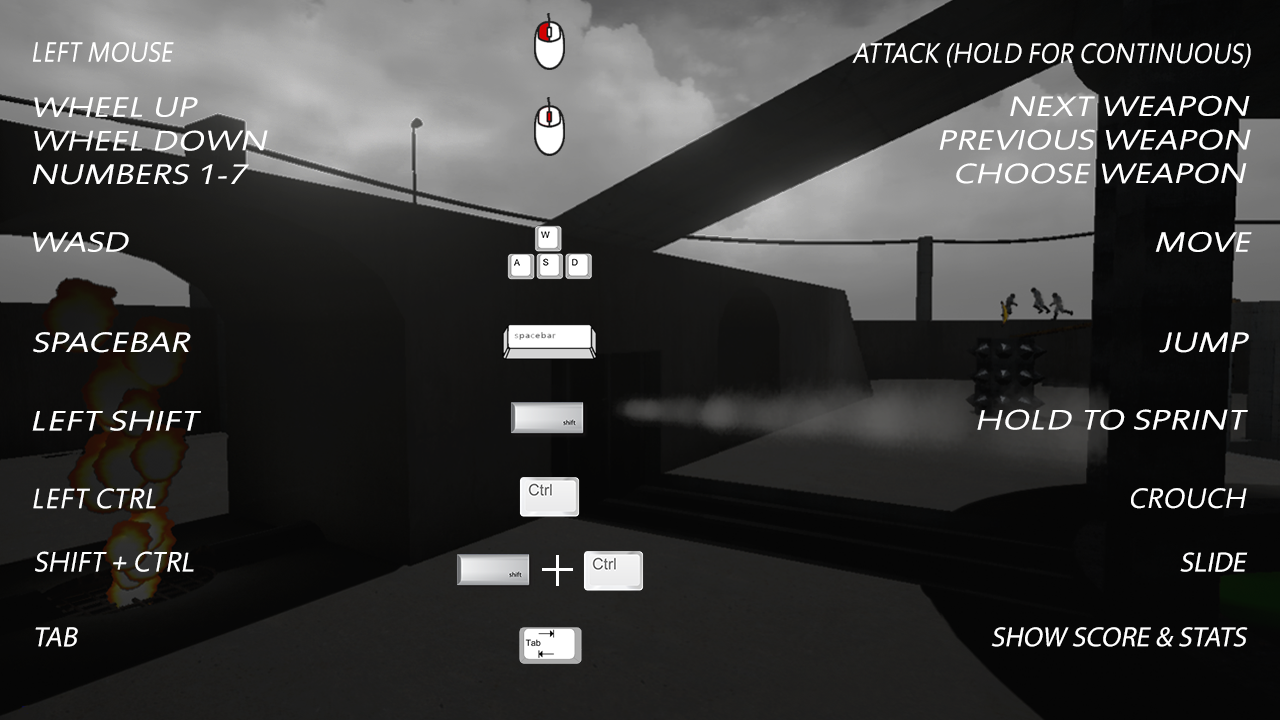
<style>
.page{position:relative;width:1280px;height:720px}
.page>*{position:absolute;margin:0}
.t1{font:28px "Miramonte";color:#ffffff;font-style:italic;scale:0.91 1}
.t2{font:28px "Miramonte";color:#ffffff;font-style:italic;scale:1.24 1}
.t3{font:28px "Miramonte";color:#ffffff;font-style:italic;scale:1.25 1}
.t4{font:28px "Miramonte";color:#ffffff;font-style:italic;scale:1.27 1}
.t5{font:28px "Miramonte";color:#ffffff;font-style:italic}
.t6{font:28px "MyriadPro-Regular";color:#ffffff;font-style:italic}
</style>
<div class="page">
<p class="t1" style="left:32px;top:42px;width:1219px;height:26px">LEFT MOUSE                              ATTACK (HOLD FOR CONTINUOUS)</p>
<p class="t2" style="left:33px;top:95px;width:1218px;height:90px">WHEEL UP                              NEXT WEAPON<br>WHEEL DOWN                         PREVIOUS WEAPON<br>NUMBERS 1-7                              CHOOSE WEAPON</p>
<p class="t2" style="left:33px;top:231px;width:1219px;height:21px">WASD                                 MOVE</p>
<p class="t3" style="left:33px;top:332px;width:1216px;height:21px">SPACEBAR                                 JUMP</p>
<p class="t4" style="left:32px;top:409px;width:1216px;height:22px">LEFT SHIFT                          HOLD TO SPRINT</p>
<p class="t5" style="left:33px;top:488px;width:1214px;height:21px">LEFT CTRL                                        CROUCH</p>
<p class="t6" style="left:35px;top:551px;width:1213px;height:21px"><span class="t5">SHIFT + CTR</span>L                                         SLIDE</p>
<p class="t6" style="left:35px;top:627px;width:1213px;height:20px">TAB                                     SHOW SCORE &amp; STATS</p>
</div>
